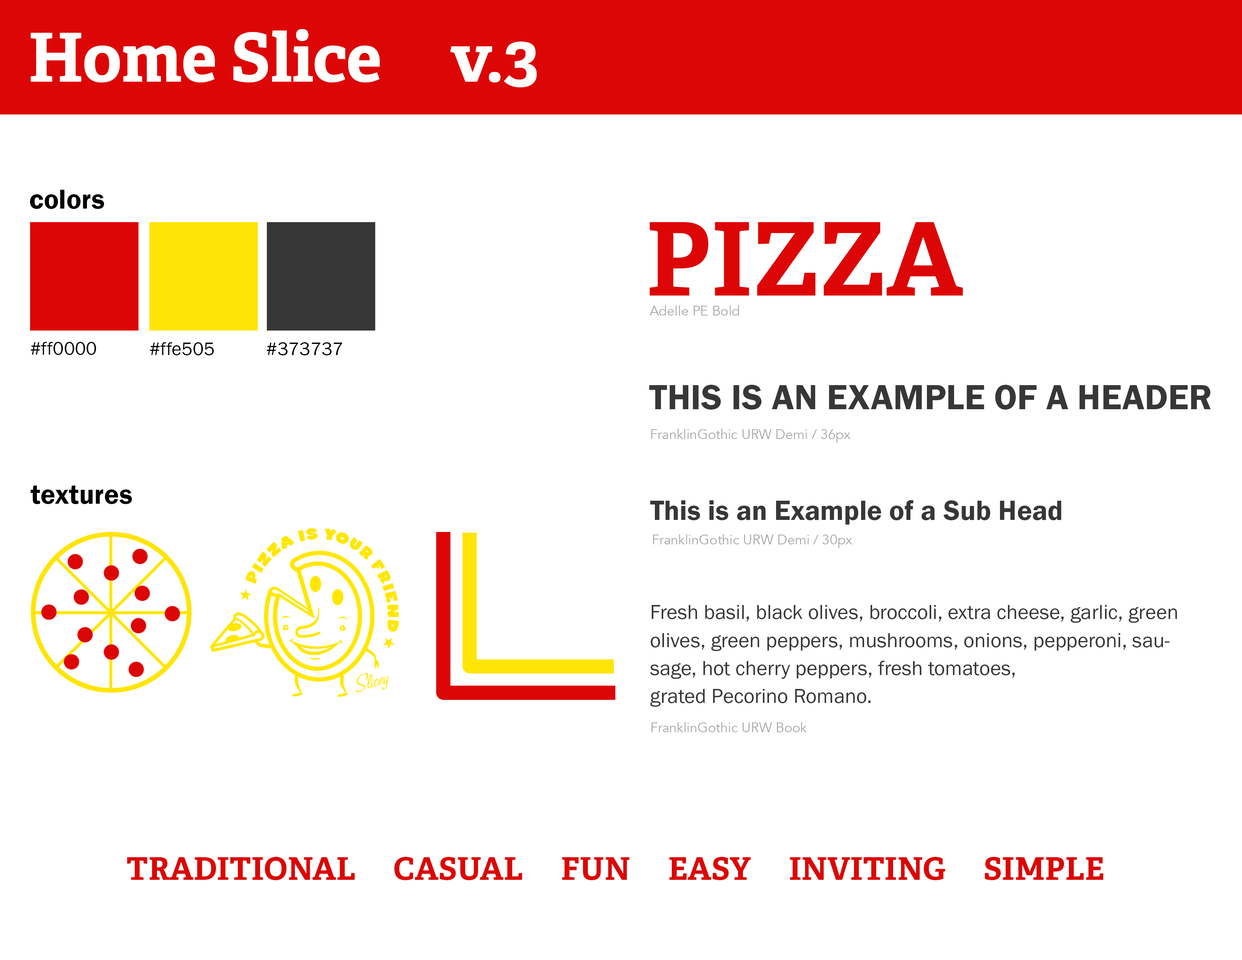
<style>
.page{position:relative;width:1242px;height:960px;background:#ffffff}
.page>*{position:absolute;margin:0}
.t1{font:67.7px "AdellePE-Bold";color:#fffffd}
.t2{font:28.2px "FranklinGothicURW-Dem";color:#000000}
.t3{font:101.3px "AdellePE-Bold";color:#dc0606}
.t4{font:13.6px "Avenir-Book";color:#a5a5a5}
.t5{font:18.8px "FranklinGothicURW-Boo";color:#030303}
.t6{font:18.8px "FranklinGothicURW-Boo";color:#020202}
.t7{font:18.8px "FranklinGothicURW-Boo";color:#010101}
.t8{font:36.3px "FranklinGothicURW-Dem";color:#373737}
.t9{font:28.2px "FranklinGothicURW-Dem";color:#010101}
.t10{font:28.6px "FranklinGothicURW-Dem";color:#373737}
.t11{font:20.9px/28px "FranklinGothicURW-Boo";color:#373737}
.t12{font:31.3px "AdellePE-Bold";color:#dc0606}
</style>
<div class="page">
<p class="t1" style="left:30px;top:29px;width:507px;height:58px">Home Slice     v.3</p>
<p class="t2" style="left:30px;top:190px;width:74px;height:19px">colors</p>
<p class="t3" style="left:650px;top:222px;width:313px;height:74px">PIZZA</p>
<p class="t4" style="left:650px;top:305px;width:89px;height:10px">Adelle PE Bold</p>
<p class="t5" style="left:30px;top:342px;width:66px;height:13px">#ff0000</p>
<p class="t6" style="left:150px;top:342px;width:64px;height:13px">#ffe505</p>
<p class="t7" style="left:267px;top:342px;width:75px;height:13px">#373737</p>
<p class="t8" style="left:649px;top:385px;width:562px;height:25px">THIS IS AN EXAMPLE OF A HEADER</p>
<p class="t4" style="left:651px;top:429px;width:200px;height:14px">FranklinGothic URW Demi / 36px</p>
<p class="t9" style="left:30px;top:485px;width:102px;height:19px">textures</p>
<p class="t10" style="left:650px;top:500px;width:412px;height:25px">This is an Example of a Sub Head</p>
<p class="t4" style="left:653px;top:534px;width:200px;height:14px">FranklinGothic URW Demi / 30px</p>
<p class="t11" style="left:650px;top:605px;width:527px;height:102px">Fresh basil, black olives, broccoli, extra cheese, garlic, green olives, green peppers, mushrooms, onions, pepperoni, sausage, hot cherry peppers, fresh tomatoes,<br>grated Pecorino Romano.</p>
<p class="t4" style="left:652px;top:722px;width:155px;height:10px">FranklinGothic URW Book</p>
<p class="t12" style="left:127px;top:857px;width:977px;height:23px">TRADITIONAL      CASUAL      FUN      EASY      INVITING      SIMPLE</p>
</div>
